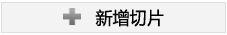
<style>
.page{position:relative;width:227px;height:35px;background:#f3f3f3}
.page>*{position:absolute;margin:0}
.t1{font:17.3px "MicrosoftYaHei";color:#020202}
</style>
<div class="page">
<p class="t1" style="left:95px;top:9px;width:69px;height:18px">新增切片</p>
</div>
